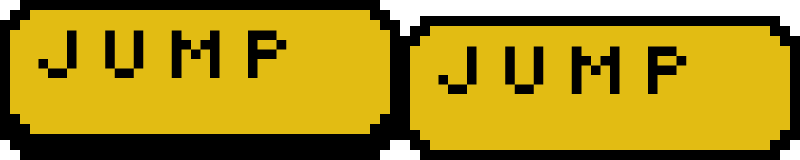
<style>
.page{position:relative;width:800px;height:160px;background:#e2bc13}
.page>*{position:absolute;margin:0}
.t1{font:80px "Silkscreen-Expanded";color:#000000}
</style>
<div class="page">
<p class="t1" style="left:38px;top:30px;width:249px;height:48px">JUMP</p>
<p class="t1" style="left:438px;top:46px;width:249px;height:48px">JUMP</p>
</div>
